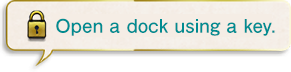
<style>
.page{position:relative;width:291px;height:72px}
.page>*{position:absolute;margin:0}
.t1{font:19px "FutoGoB101Pr5-Bold";color:#008c91}
</style>
<div class="page">
<p class="t1" style="left:56px;top:18px;width:219px;height:18px">Open a dock using a key.</p>
</div>
